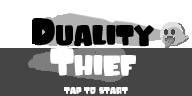
<style>
.page{position:relative;width:192px;height:96px;background:#ffffff}
.page>*{position:absolute;margin:0}
.t1{font:29.9px "TrickyJimmyRegular";color:#ffffff;text-transform:uppercase}
.t2{font:39.9px "TrickyJimmyRegular";color:#ffffff;text-transform:uppercase}
.t3{font:10px "TrickyJimmyRegular";color:#ffffff;text-transform:uppercase}
</style>
<div class="page">
<p class="t1" style="left:50px;top:48px;width:86px;height:28px"><span class="t2">T</span>hief</p>
<p class="t3" style="left:64px;top:87px;width:64px;height:7px">TaP To START</p>
</div>
